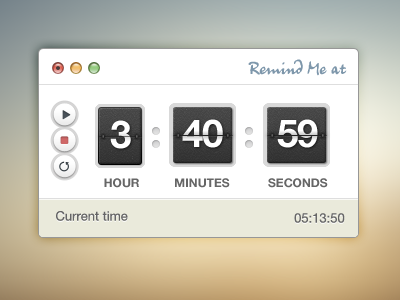
<style>
.page{position:relative;width:400px;height:300px;background:#ffffff}
.page>*{position:absolute;margin:0}
.t1{font:20px "Juergen";color:#7e97ab}
.t2{font:38.5px "HelveticaNeue-Bold";letter-spacing:-0.02em;color:#ffffff}
.t3{font:12px "HelveticaNeue-Bold";color:#666666}
.t4{font:13px "HelveticaNeue";color:#666666}
</style>
<div class="page">
<p class="t1" style="left:248px;top:59px;width:99px;height:17px">Remind Me at</p>
<p class="t2" style="left:110px;top:120px;width:21px;height:29px">3</p>
<p class="t2" style="left:182px;top:119px;width:41px;height:29px">40</p>
<p class="t2" style="left:277px;top:119px;width:41px;height:29px">59</p>
<p class="t3" style="left:104px;top:178px;width:35px;height:10px">HOUR</p>
<p class="t3" style="left:175px;top:178px;width:55px;height:10px">MINUTES</p>
<p class="t3" style="left:268px;top:178px;width:60px;height:10px">SECONDS</p>
<p class="t4" style="left:56px;top:211px;width:72px;height:10px">Current time</p>
<p class="t4" style="left:294px;top:213px;width:51px;height:10px">05:13:50</p>
</div>
